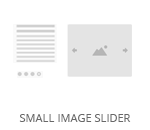
<style>
.page{position:relative;width:150px;height:130px;background:#ffffff}
.page>*{position:absolute;margin:0}
.t1{font:11px "OpenSans";color:#686868;text-transform:uppercase}
</style>
<div class="page">
<p class="t1" style="left:19px;top:114px;width:112px;height:8px">Small Image Slider</p>
</div>
